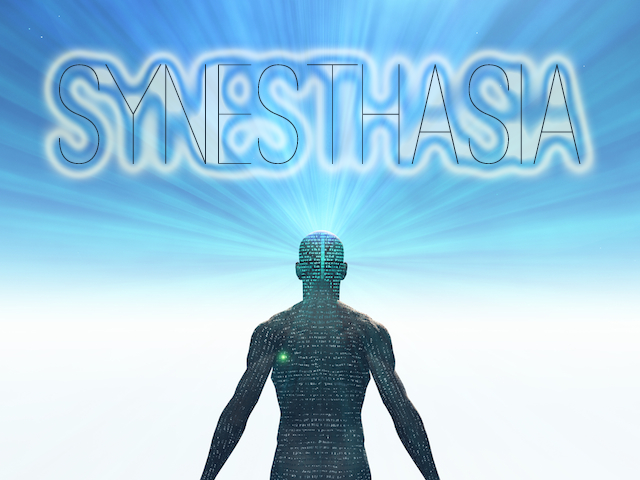
<style>
.page{position:relative;width:640px;height:480px}
.page>*{position:absolute;margin:0}
.t1{font:153.6px "OstrichSans-Light";color:#1f3140}
</style>
<div class="page">
<p class="t1" style="left:59px;top:64px;width:522px;height:100px">SYNESTHASIA</p>
</div>
